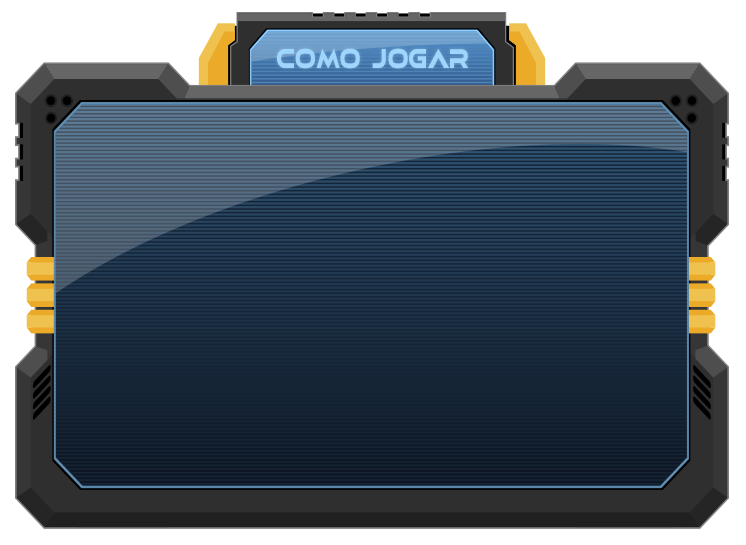
<style>
.page{position:relative;width:746px;height:545px}
.page>*{position:absolute;margin:0}
.t1{font:33.1px "elasisrg";letter-spacing:0.01em;color:#9ed6fd;scale:0.69 1}
</style>
<div class="page">
<p class="t1" style="left:277px;top:48px;width:192px;height:21px">COMO JOGAR</p>
</div>
